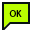
<style>
.page{position:relative;width:32px;height:32px;background:#baff00}
.page>*{position:absolute;margin:0}
.t1{font:9px "MyriadPro-Regular";color:#000000}
</style>
<div class="page">
<p class="t1" style="left:9px;top:10px;width:13px;height:7px">OK</p>
</div>
